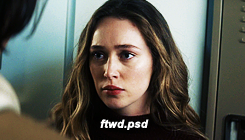
<style>
.page{position:relative;width:245px;height:140px}
.page>*{position:absolute;margin:0}
.t1{font:11px "Arial-BoldItalicMT";color:#ffffff;font-weight:bold}
</style>
<div class="page">
<p class="t1" style="left:100px;top:119px;width:49px;height:11px">ftwd.psd</p>
</div>
